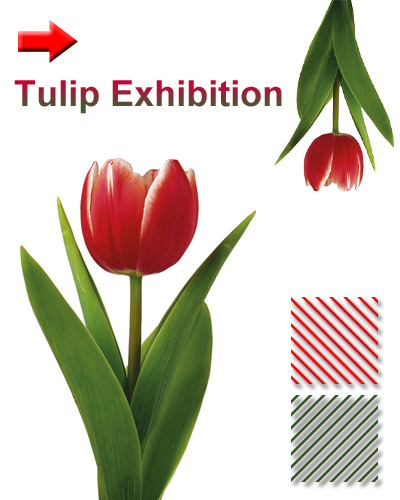
<style>
.page{position:relative;width:400px;height:500px;background:#ffffff}
.page>*{position:absolute;margin:0}
.t1{font:36px "Arial-BoldMT"}
</style>
<div class="page">
<p class="t1" style="left:14px;top:80px;width:268px;height:34px">Tulip Exhibition</p>
</div>
